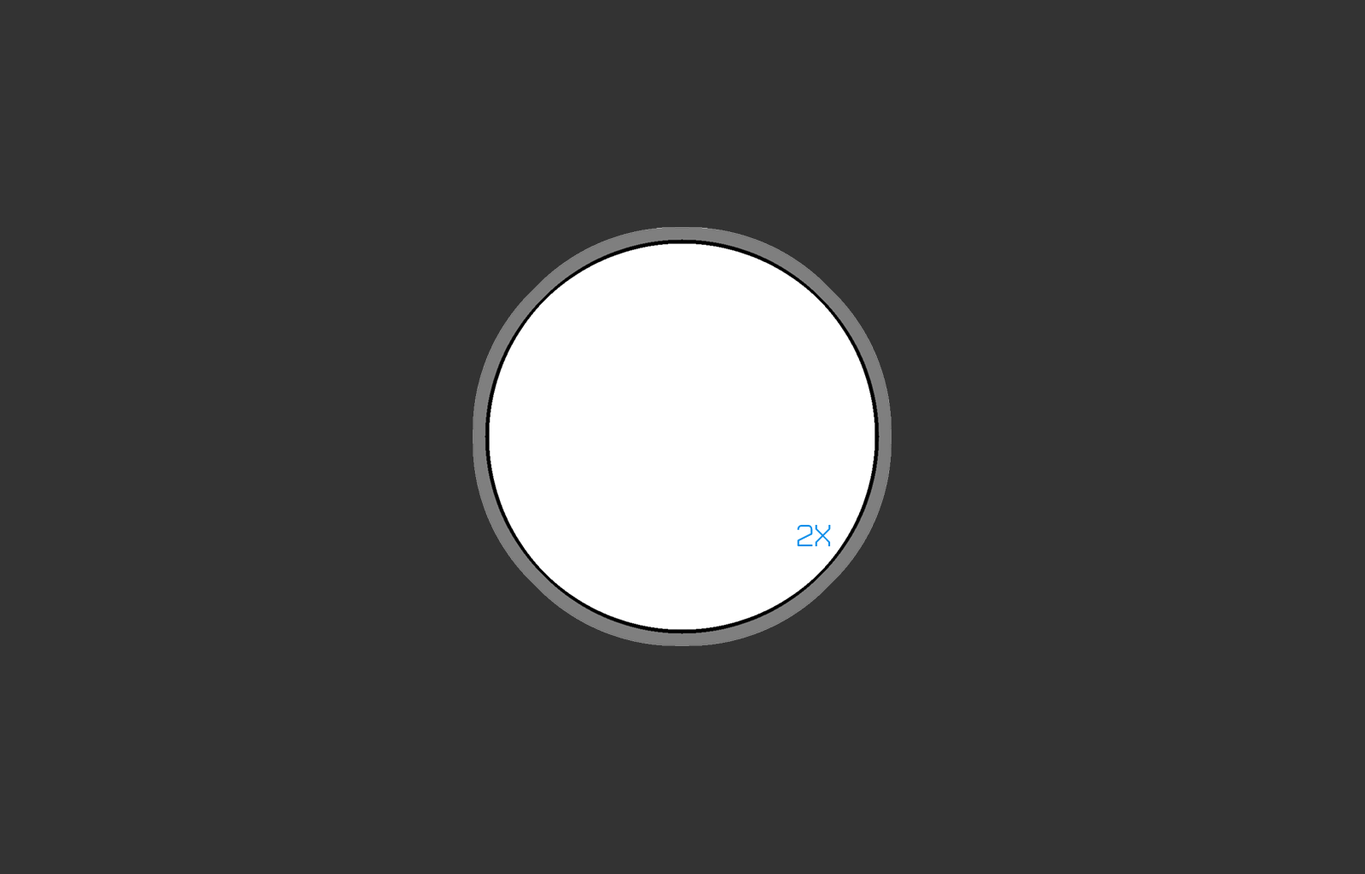
<style>
.page{position:relative;width:1365px;height:874px;background:#333333}
.page>*{position:absolute;margin:0}
.t1{font:30.5px "Arame-Thin";color:#108fea}
</style>
<div class="page">
<p class="t1" style="left:797px;top:524px;width:34px;height:23px">2x</p>
</div>
